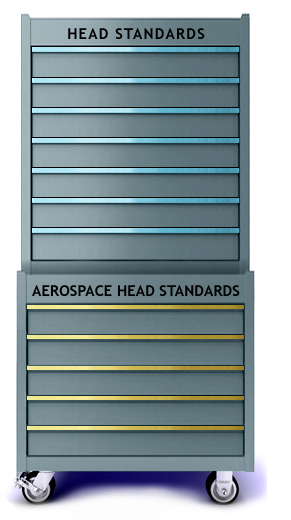
<style>
.page{position:relative;width:291px;height:520px;background:#ffffff}
.page>*{position:absolute;margin:0}
.t1{font:15px "TrebuchetMS-Bold";letter-spacing:0.075em;color:#000000;text-transform:uppercase}
.t2{font:15px "TrebuchetMS-Bold";color:#000000;text-transform:uppercase}
</style>
<div class="page">
<p class="t1" style="left:68px;top:28px;width:137px;height:11px">HEAD STANDARDS</p>
<p class="t2" style="left:32px;top:285px;width:208px;height:11px">AEROSPACE HEAD STANDARDS</p>
</div>
